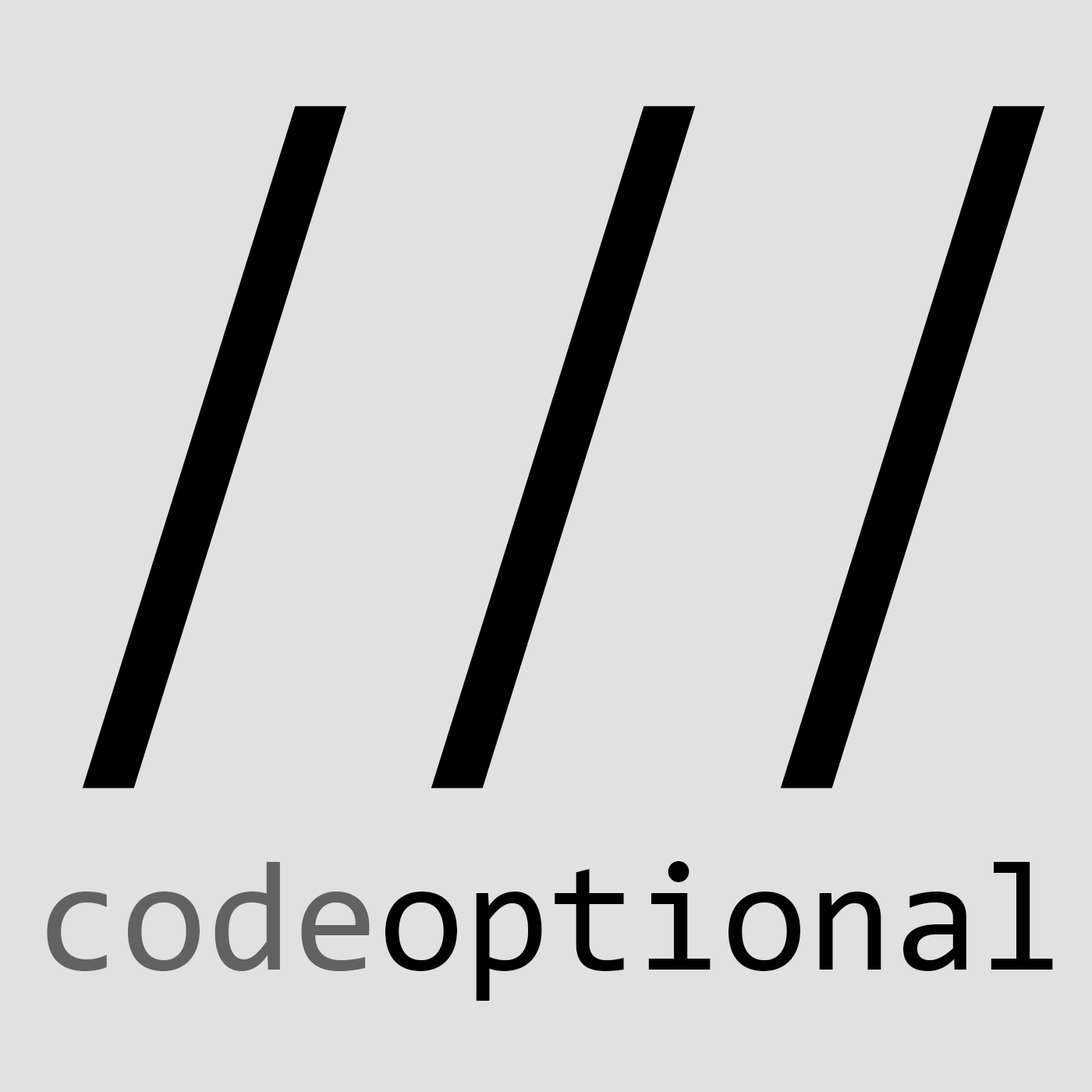
<style>
.page{position:relative;width:1092px;height:1092px;background:#e1e1e1}
.page>*{position:absolute;margin:0}
.t1{font:858px "Consolas";color:#000000;scale:0.74 1}
.t2{font:156px "Consolas";color:#010101}
.t3{font:156px "Consolas";color:#626262}
</style>
<div class="page">
<p class="t1" style="left:82px;top:106px;width:963px;height:683px">///</p>
<p class="t2" style="left:47px;top:861px;width:1006px;height:140px"><span class="t3">code</span>optional</p>
</div>
